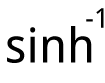
<style>
.page{position:relative;width:105px;height:83px;background:#ffffff}
.page>*{position:absolute;margin:0}
.t1{font:27.2px "DroidSans";color:#000000}
.t2{font:47.9px "DroidSans";color:#000000}
</style>
<div class="page">
<p class="t1" style="left:86px;top:8px;width:18px;height:20px">-1</p>
<p class="t2" style="left:7px;top:26px;width:85px;height:37px">sinh</p>
</div>
